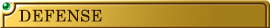
<style>
.page{position:relative;width:272px;height:28px}
.page>*{position:absolute;margin:0}
.t1{font:16px "CenturySchoolbook";letter-spacing:0.025em;color:#321a02}
</style>
<div class="page">
<p class="t1" style="left:19px;top:9px;width:83px;height:13px">DEFENSE</p>
</div>
